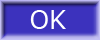
<style>
.page{position:relative;width:100px;height:40px;background:#3c32bd}
.page>*{position:absolute;margin:0}
.t1{font:25px "MSReferenceSansSerif";color:#ffffff}
</style>
<div class="page">
<p class="t1" style="left:30px;top:10px;width:36px;height:19px">OK</p>
</div>
